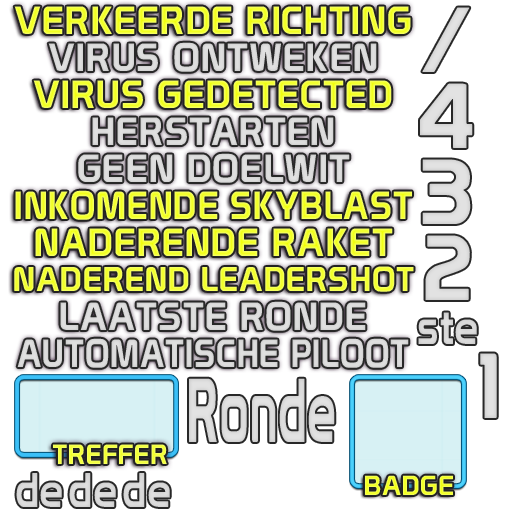
<style>
.page{position:relative;width:512px;height:512px;background:#ffffff}
.page>*{position:absolute;margin:0}
.t1{font:38.5px "Prototype";letter-spacing:0.03em}
.t2{font:38.5px "Prototype";letter-spacing:0.03em;color:#dbdbdb}
.t3{font:38.5px "Prototype";letter-spacing:0.03em;scale:0.93 1}
.t4{font:33.6px "Prototype";letter-spacing:0.03em}
.t5{font:47.3px "Prototype";letter-spacing:0.03em;color:#d8d8d8;scale:0.87 1}
.t6{font:38.5px "Prototype";letter-spacing:0.03em;color:#dbdbdb;scale:0.89 1}
.t7{font:90px "Prototype";letter-spacing:0.03em;color:#e0e0e0}
.t8{font:27.1px "Prototype";letter-spacing:0.03em;color:#f4ff50}
.t9{font:27.1px "Prototype";letter-spacing:0.03em}
</style>
<div class="page">
<p class="t1" style="left:14px;top:6px;width:397px;height:28px">VERKEERDE RICHTING</p>
<p class="t2" style="left:48px;top:42px;width:329px;height:30px">VIRUS ONTWEKEN</p>
<p class="t1" style="left:33px;top:80px;width:359px;height:28px">VIRUS GEDETECTED</p>
<p class="t2" style="left:92px;top:117px;width:242px;height:28px">HERSTARTEN</p>
<p class="t2" style="left:78px;top:153px;width:272px;height:30px">GEEN DOELWIT</p>
<p class="t3" style="left:15px;top:190px;width:397px;height:30px">INKOMENDE SKYBLAST</p>
<p class="t1" style="left:35px;top:228px;width:358px;height:28px">NADERENDE RAKET</p>
<p class="t4" style="left:14px;top:266px;width:400px;height:26px">NADEREND LEADERSHOT</p>
<p class="t2" style="left:60px;top:301px;width:306px;height:30px">LAATSTE RONDE</p>
<p class="t5" style="left:418px;top:312px;width:59px;height:32px">ste</p>
<p class="t6" style="left:17px;top:338px;width:392px;height:30px">AUTOMATISCHE PILOOT</p>
<p class="t7" style="left:480px;top:353px;width:17px;height:65px">1</p>
<p class="t8" style="left:53px;top:444px;width:114px;height:20px">TREFFER</p>
<p class="t9" style="left:365px;top:475px;width:88px;height:20px">BADGE</p>
</div>
